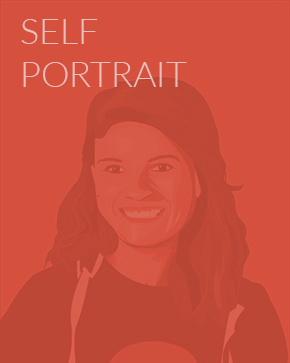
<style>
.page{position:relative;width:290px;height:363px;background:#d5513e}
.page>*{position:absolute;margin:0}
.t1{font:36px "Lato-Light";color:#e9bfbb}
</style>
<div class="page">
<p class="t1" style="left:21px;top:19px;width:166px;height:68px">SELF<br>PORTRAIT</p>
</div>
